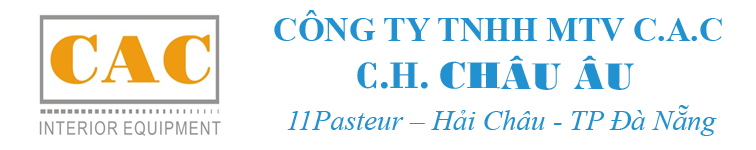
<style>
.page{position:relative;width:756px;height:150px;background:#ffffff}
.page>*{position:absolute;margin:0}
.t1{font:34px "TimesNewRomanPS-BoldMT";color:#2291d0}
.t2{font:39px "BodoniMTBlack";color:#2291d0}
.t3{font:39px "BodoniMT-Bold";color:#2291d0}
.t4{font:29px "TimesNewRomanPS-ItalicMT";color:#2291d0}
.t5{font:29px "BodoniMTBlack";color:#2291d0}
</style>
<div class="page">
<p class="t1" style="left:274px;top:10px;width:448px;height:31px">CÔNG TY TNHH MTV C.A.C   C.A.C</p>
<p class="t2" style="left:357px;top:55px;width:277px;height:35px"><span class="t3">C.H. </span>CHÂU ÂU</p>
<p class="t4" style="left:287px;top:105px;width:430px;height:31px"><span class="t5"> </span>11Pasteur – Hải Châu - TP Đà Nẵng</p>
</div>
